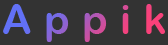
<style>
.page{position:relative;width:168px;height:45px;background:#333333}
.page>*{position:absolute;margin:0}
.t1{font:41px "ArialRoundedMTBold";letter-spacing:0.3em}
</style>
<div class="page">
<p class="t1" style="left:3px;top:4px;width:162px;height:38px">Appik</p>
</div>
